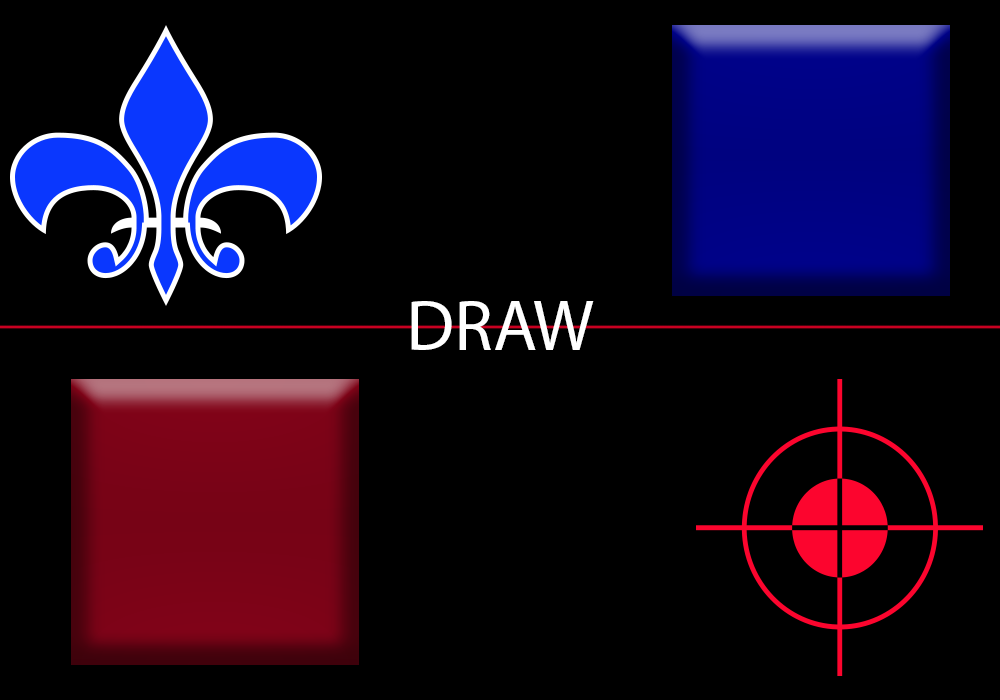
<style>
.page{position:relative;width:1000px;height:700px;background:#000000}
.page>*{position:absolute;margin:0}
.t1{font:72px "MyriadPro-Regular";color:#ffffff}
</style>
<div class="page">
<p class="t1" style="left:411px;top:301px;width:183px;height:49px">DRAW</p>
</div>
